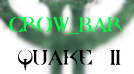
<style>
.page{position:relative;width:134px;height:74px;background:#ffffff}
.page>*{position:absolute;margin:0}
.t1{font:18px "QUAKE";color:#00ff42}
.t2{font:12px "QUAKE";color:#ff0000}
.t3{font:18px "QUAKE";color:#000000}
</style>
<div class="page">
<p class="t1" style="left:9px;top:17px;width:112px;height:17px"><span class="t2">       </span>CROW_BAR</p>
<p class="t3" style="left:18px;top:49px;width:103px;height:22px">QUAKE II</p>
</div>
